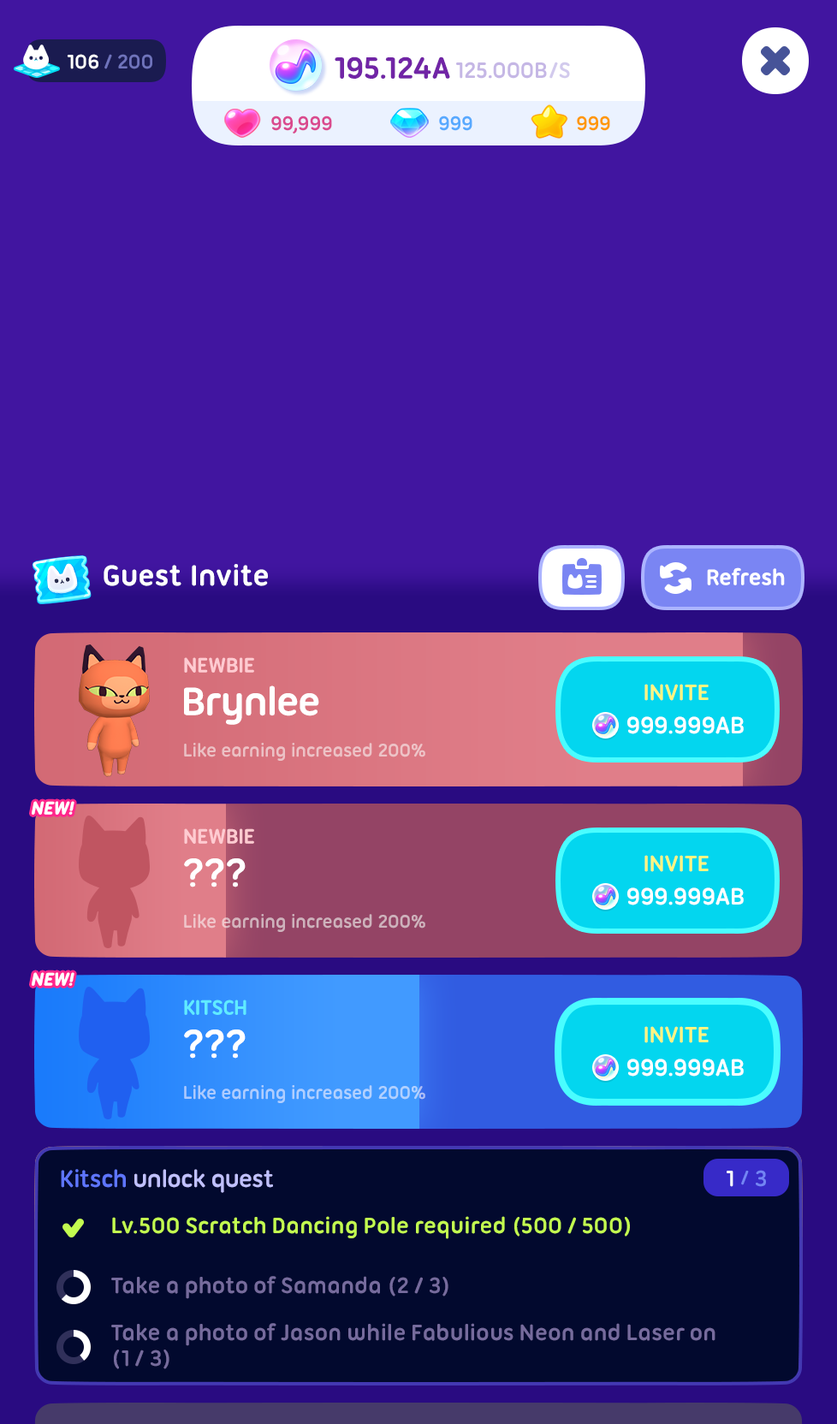
<style>
.page{position:relative;width:837px;height:1424px;background:#4115a0}
.page>*{position:absolute;margin:0}
.t1{font:21.4px "UbuntuTitling-Bold";letter-spacing:-0.025em;color:#6f73bc;text-transform:uppercase}
.t2{font:21.4px "UbuntuTitling-Bold";letter-spacing:-0.025em;color:#ffffff;text-transform:uppercase}
.t3{font:30.8px "UbuntuTitling-Bold";color:#ffffff}
.t4{font:24px "UbuntuTitling-Bold";letter-spacing:-0.025em;color:#ffffff}
.t5{font:22.3px "UbuntuTitling-Bold";letter-spacing:-0.025em;color:#ffcbd1;text-transform:uppercase}
.t6{font:42.8px "UbuntuTitling-Bold";letter-spacing:-0.025em;color:#ffffff}
.t7{font:24px "UbuntuTitling-Bold";letter-spacing:-0.025em;color:#fff580;text-transform:uppercase}
.t8{font:25.7px "UbuntuTitling-Bold";letter-spacing:-0.025em;color:#ffffff}
.t9{font:19.7px "UbuntuTitling-Bold";letter-spacing:-0.025em;color:#edc1c5}
.t10{font:18.8px "UbuntuTitling-Bold";letter-spacing:-0.03em;color:#ffffff;text-transform:uppercase;font-weight:bold;font-style:italic}
.t11{font:19.7px "UbuntuTitling-Bold";letter-spacing:-0.025em;color:#ceb2bc}
.t12{font:22.3px "UbuntuTitling-Bold";letter-spacing:-0.025em;color:#60ebff;text-transform:uppercase}
.t13{font:19.7px "UbuntuTitling-Bold";letter-spacing:-0.025em;color:#b0cfff}
.t14{font:25.7px "UbuntuTitling-Bold";letter-spacing:-0.025em;color:#c0c0ff}
.t15{font:25.7px "UbuntuTitling-Bold";letter-spacing:-0.025em;color:#5e75ff}
.t16{font:21.2px "UbuntuTitling-Bold";letter-spacing:-0.025em;color:#7385f4}
.t17{font:24px "UbuntuTitling-Bold";letter-spacing:-0.025em;color:#7385f4}
.t18{font:24px "UbuntuTitling-Bold";letter-spacing:-0.025em;color:#c3fc50}
.t19{font:24px "UbuntuTitling-Bold";letter-spacing:-0.025em;color:#766b9d}
.t20{font:24px/25.7px "UbuntuTitling-Bold";letter-spacing:-0.025em;color:#766b9d}
</style>
<div class="page">
<p class="t1" style="left:67px;top:54px;width:85px;height:15px"><span class="t2">106 </span>/ 200</p>
<p class="t3" style="left:104px;top:564px;width:164px;height:22px">Guest Invite</p>
<p class="t4" style="left:707px;top:568px;width:78px;height:18px">Refresh</p>
<p class="t5" style="left:184px;top:657px;width:70px;height:16px">Newbie</p>
<p class="t6" style="left:184px;top:686px;width:135px;height:39px">Brynlee</p>
<p class="t7" style="left:645px;top:684px;width:64px;height:17px">Invite</p>
<p class="t8" style="left:627px;top:716px;width:117px;height:18px">999.999AB</p>
<p class="t9" style="left:184px;top:743px;width:241px;height:18px">Like earning increased 200%</p>
<p class="t10" style="left:32px;top:801px;width:42px;height:14px">New!</p>
<p class="t5" style="left:184px;top:829px;width:70px;height:15px">Newbie</p>
<p class="t7" style="left:645px;top:855px;width:64px;height:17px">Invite</p>
<p class="t6" style="left:184px;top:859px;width:62px;height:29px">???</p>
<p class="t8" style="left:627px;top:888px;width:117px;height:18px">999.999AB</p>
<p class="t11" style="left:184px;top:914px;width:241px;height:18px">Like earning increased 200%</p>
<p class="t10" style="left:32px;top:972px;width:42px;height:14px">New!</p>
<p class="t12" style="left:184px;top:1000px;width:63px;height:15px">Kitsch</p>
<p class="t6" style="left:184px;top:1030px;width:62px;height:29px">???</p>
<p class="t7" style="left:645px;top:1026px;width:64px;height:17px">Invite</p>
<p class="t8" style="left:627px;top:1059px;width:117px;height:18px">999.999AB</p>
<p class="t13" style="left:184px;top:1085px;width:241px;height:18px">Like earning increased 200%</p>
<p class="t14" style="left:61px;top:1169px;width:212px;height:24px"><span class="t15">Kitsch</span> unlock quest</p>
<p class="t4" style="left:727px;top:1170px;width:39px;height:17px">1 <span class="t16">/ </span><span class="t17">3</span></p>
<p class="t18" style="left:112px;top:1216px;width:518px;height:23px">Lv.500 Scratch Dancing Pole required (500 / 500)</p>
<p class="t19" style="left:111px;top:1276px;width:338px;height:23px">Take a photo of Samanda (2 / 3)</p>
<p class="t20" style="left:111px;top:1323px;width:605px;height:47px">Take a photo of Jason while Fabulious Neon and Laser on<br>(1 / 3)</p>
</div>
